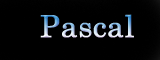
<style>
.page{position:relative;width:160px;height:60px;background:#000000}
.page>*{position:absolute;margin:0}
.t1{font:30px "Century";font-weight:bold}
</style>
<div class="page">
<p class="t1" style="left:40px;top:14px;width:94px;height:24px">Pascal</p>
</div>
